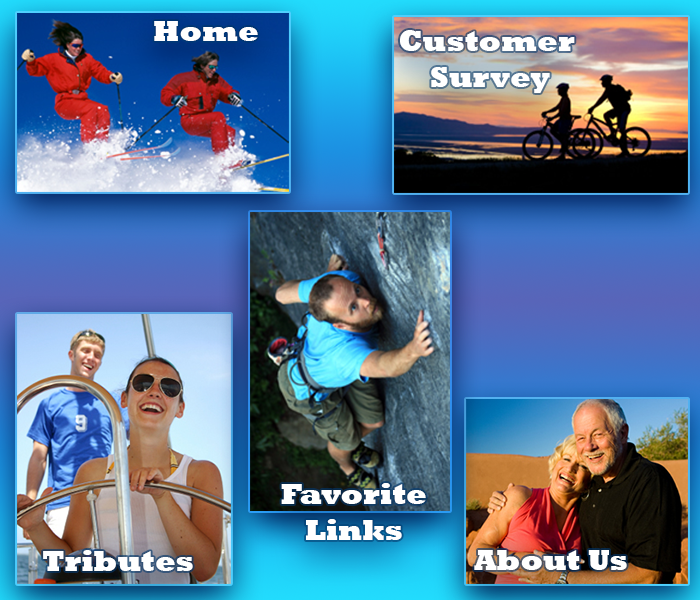
<style>
.page{position:relative;width:700px;height:600px}
.page>*{position:absolute;margin:0}
.t1{font:30px "Rockwell-ExtraBold";color:#ffffff}
</style>
<div class="page">
<p class="t1" style="left:154px;top:21px;width:104px;height:20px">Home</p>
<p class="t1" style="left:400px;top:30px;width:175px;height:63px;text-align:center">Customer <br>Survey</p>
<p class="t1" style="left:281px;top:483px;width:145px;height:57px;text-align:center">Favorite<br>Links</p>
<p class="t1" style="left:43px;top:550px;width:150px;height:21px">Tributes</p>
<p class="t1" style="left:474px;top:550px;width:153px;height:20px">About Us</p>
</div>
